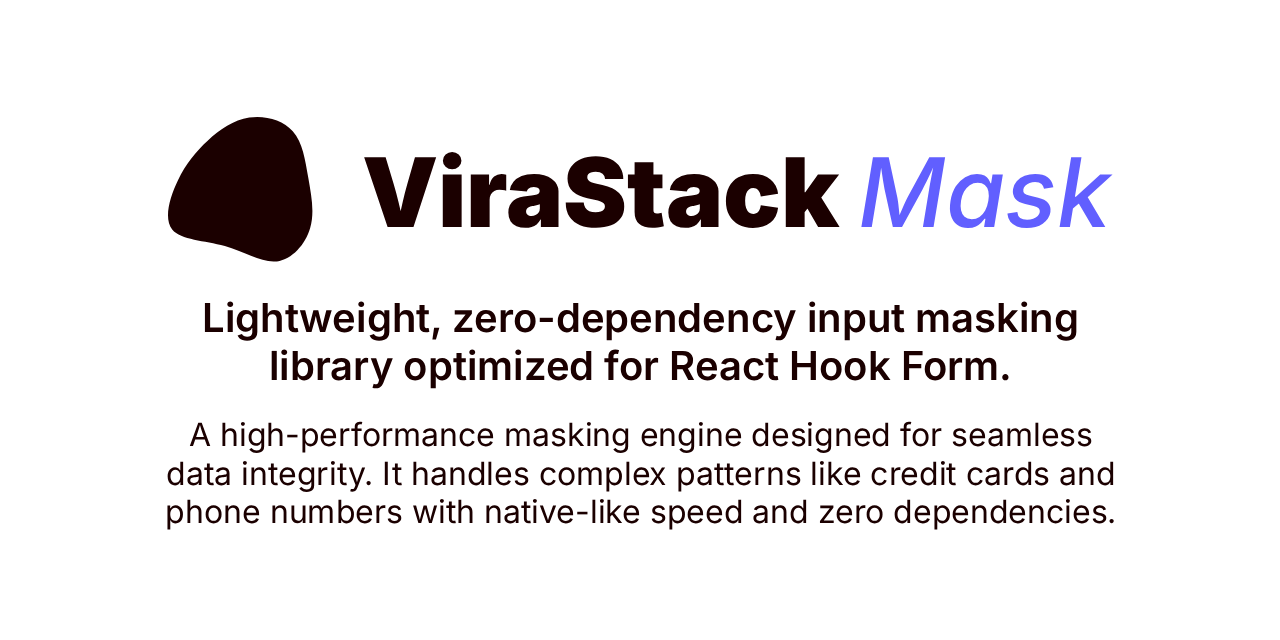
<style>
.page{position:relative;width:1280px;height:640px;background:#ffffff}
.page>*{position:absolute;margin:0}
.t1{font:96px "Inter-Black";color:#1b0000}
.t2{font:96px "Inter-MediumItalic";color:#615fff}
.t3{font:40px "Inter-SemiBold";color:#1b0000}
.t4{font:32px "Inter-Regular";color:#1b0000}
</style>
<div class="page">
<p class="t1" style="left:364px;top:152px;width:749px;height:77px">ViraStack <span class="t2">Mask</span></p>
<p class="t3" style="left:204px;top:301px;width:873px;height:88px;text-align:center">Lightweight, zero-dependency input masking library optimized for React Hook Form.</p>
<p class="t4" style="left:167px;top:421px;width:947px;height:109px;text-align:center">A high-performance masking engine designed for seamless data integrity. It handles complex patterns like credit cards and phone numbers with native-like speed and zero dependencies.</p>
</div>
